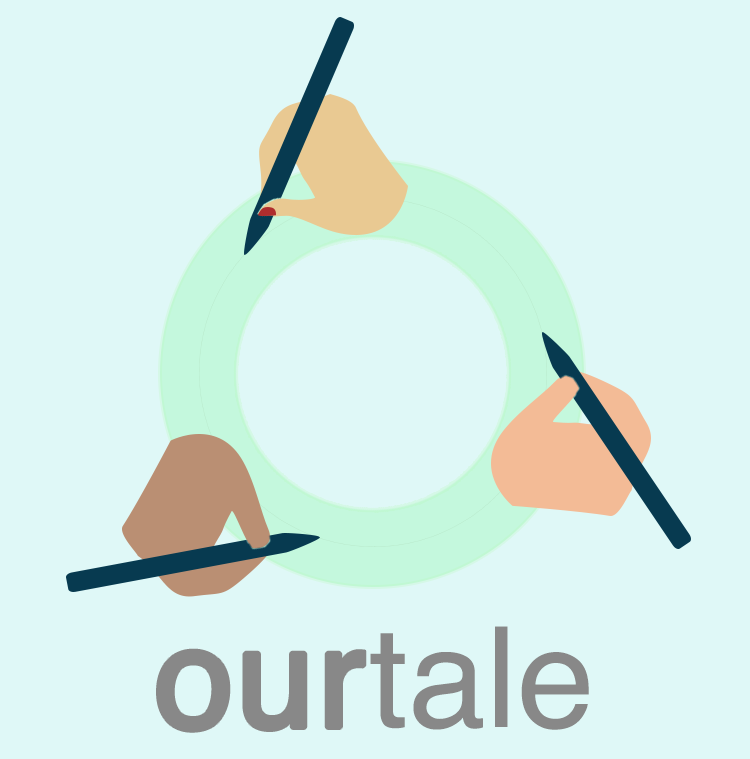
<style>
.page{position:relative;width:750px;height:759px;background:#dff8f7}
.page>*{position:absolute;margin:0}
.t1{font:140px "Helvetica";color:#888888}
.t2{font:140px "Helvetica";color:#888888;font-weight:bold}
</style>
<div class="page">
<p class="t1" style="left:370px;top:626px;width:219px;height:104px">tale</p>
<p class="t2" style="left:157px;top:649px;width:209px;height:83px">our</p>
</div>
